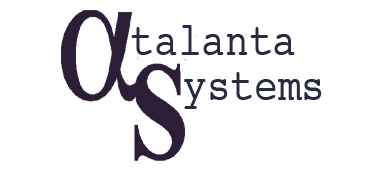
<style>
.page{position:relative;width:365px;height:175px;background:#ffffff}
.page>*{position:absolute;margin:0}
.t1{font:46.4px "Courier";color:#272a40;scale:0.85 1}
</style>
<div class="page">
<p class="t1" style="left:131px;top:25px;width:164px;height:30px">talanta</p>
<p class="t1" style="left:184px;top:72px;width:138px;height:37px">ystems</p>
</div>
